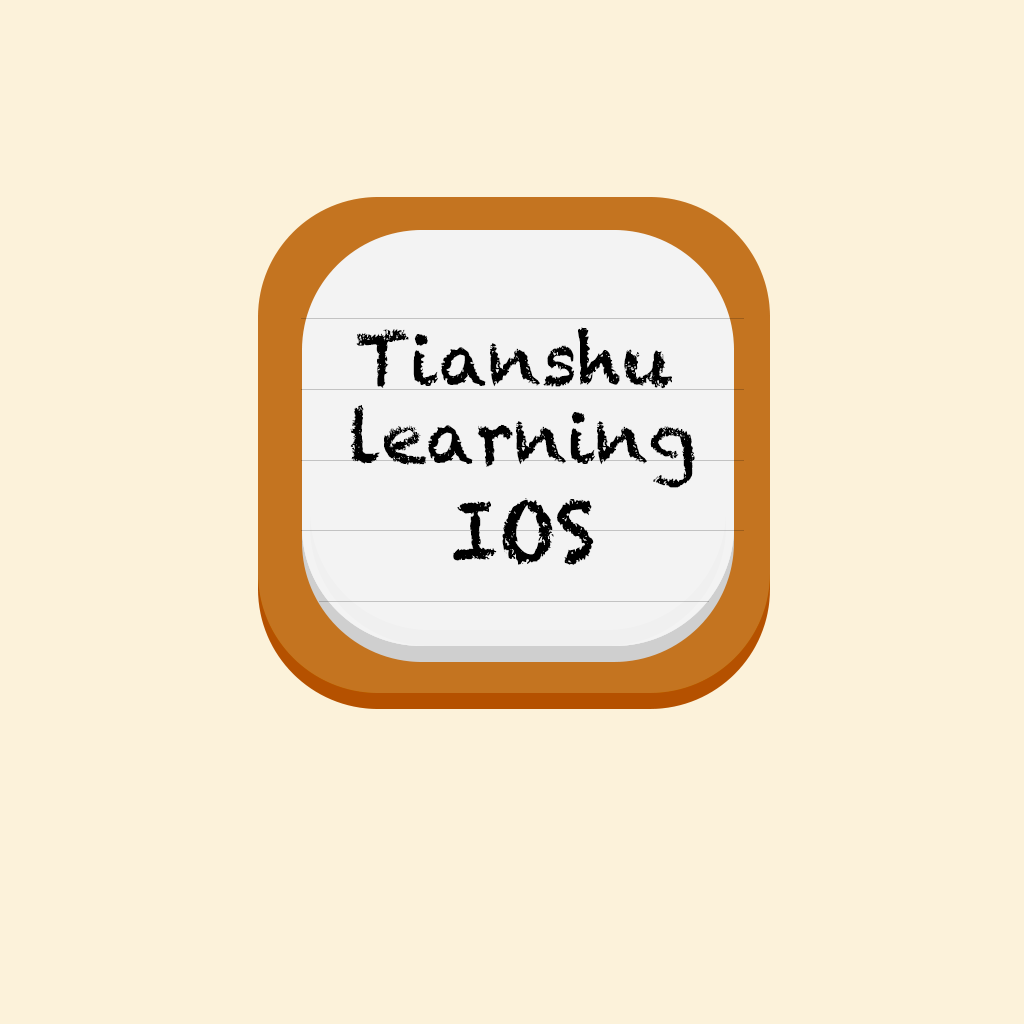
<style>
.page{position:relative;width:1024px;height:1024px;background:#fcf2da}
.page>*{position:absolute;margin:0}
.t1{font:72px "Chalkduster";color:#000000}
.t2{font:80px "Chalkduster";color:#000000}
</style>
<div class="page">
<p class="t1" style="left:356px;top:327px;width:316px;height:62px">Tianshu</p>
<p class="t1" style="left:350px;top:405px;width:345px;height:83px">learning</p>
<p class="t2" style="left:453px;top:498px;width:141px;height:67px">IOS</p>
</div>
